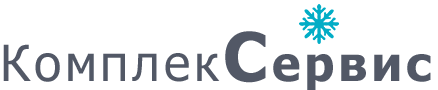
<style>
.page{position:relative;width:438px;height:90px;background:#ffffff}
.page>*{position:absolute;margin:0}
.t1{font:50px "Tahoma";letter-spacing:0.075em;color:#525866}
.t2{font:67px "Tahoma-Bold";letter-spacing:0.075em;color:#525866}
.t3{font:48px "Tahoma-Bold";letter-spacing:0.075em;color:#525866}
</style>
<div class="page">
<p class="t1" style="left:3px;top:31px;width:428px;height:60px">Комплек<span class="t2">С</span><span class="t3">ервис</span></p>
</div>
